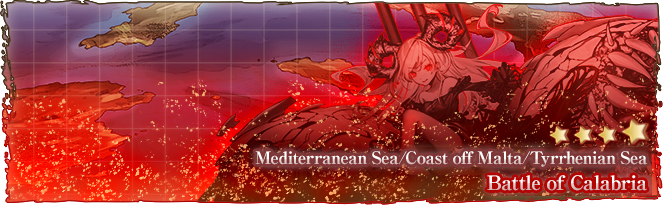
<style>
.page{position:relative;width:663px;height:205px}
.page>*{position:absolute;margin:0}
.t1{font:17px "RyuminPro-ExBold";letter-spacing:-0.04em}
.t2{font:20px "RyuminPro-ExBold";letter-spacing:-0.04em}
</style>
<div class="page">
<p class="t1" style="left:255px;top:151px;width:393px;height:16px">Mediterranean Sea/Coast off Malta/Tyrrhenian Sea</p>
<p class="t2" style="left:487px;top:175px;width:160px;height:16px">Battle of Calabria</p>
</div>
